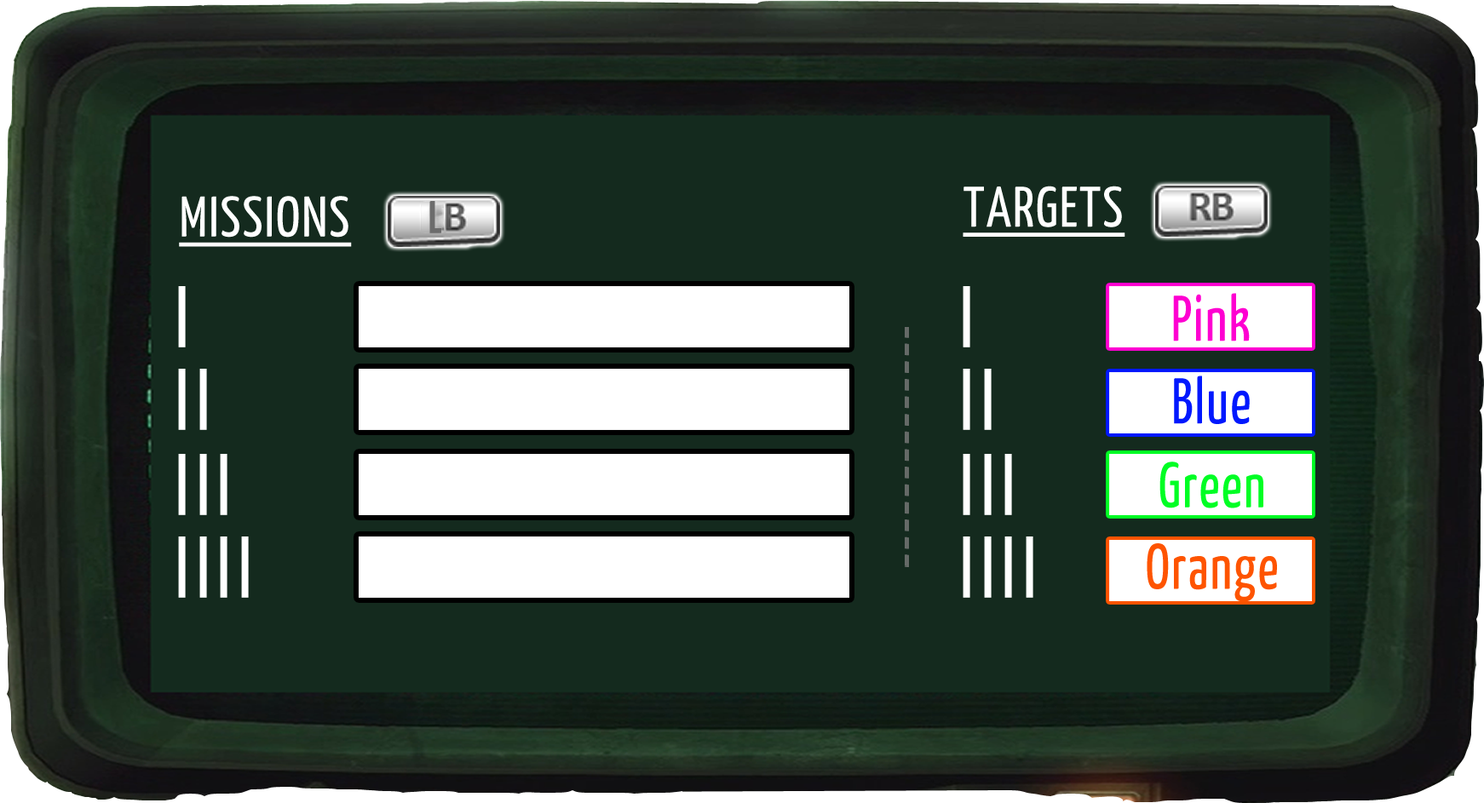
<style>
.page{position:relative;width:1484px;height:803px;background:#142a1e}
.page>*{position:absolute;margin:0}
.t1{font:57.1px "YanoneKaffeesatz-Regular";letter-spacing:0.03em;color:#ffffff;text-decoration:underline}
.t2{font:46px "YanoneKaffeesatz-Bold";letter-spacing:0.03em;color:#6c6c6c}
.t3{font:64.5px "YanoneKaffeesatz-Regular";letter-spacing:0.03em;color:#fe00d1;scale:0.88 1}
.t4{font:64.5px "YanoneKaffeesatz-Regular";letter-spacing:0.03em;color:#0018fe;scale:0.88 1}
.t5{font:64.5px "YanoneKaffeesatz-Regular";letter-spacing:0.03em;color:#00fe24;scale:0.88 1}
.t6{font:64.5px "YanoneKaffeesatz-Regular";letter-spacing:0.03em;color:#fe5400;scale:0.88 1}
</style>
<div class="page">
<p class="t1" style="left:963px;top:186px;width:162px;height:51px">TARGETS</p>
<p class="t1" style="left:179px;top:196px;width:173px;height:51px">MISSIONS</p>
<p class="t2" style="left:429px;top:201px;width:12px;height:32px">L</p>
<p class="t3" style="left:1173px;top:293px;width:77px;height:49px">Pink</p>
<p class="t4" style="left:1174px;top:376px;width:76px;height:48px">Blue</p>
<p class="t5" style="left:1160px;top:462px;width:104px;height:47px">Green</p>
<p class="t6" style="left:1147px;top:544px;width:130px;height:58px">Orange</p>
</div>
